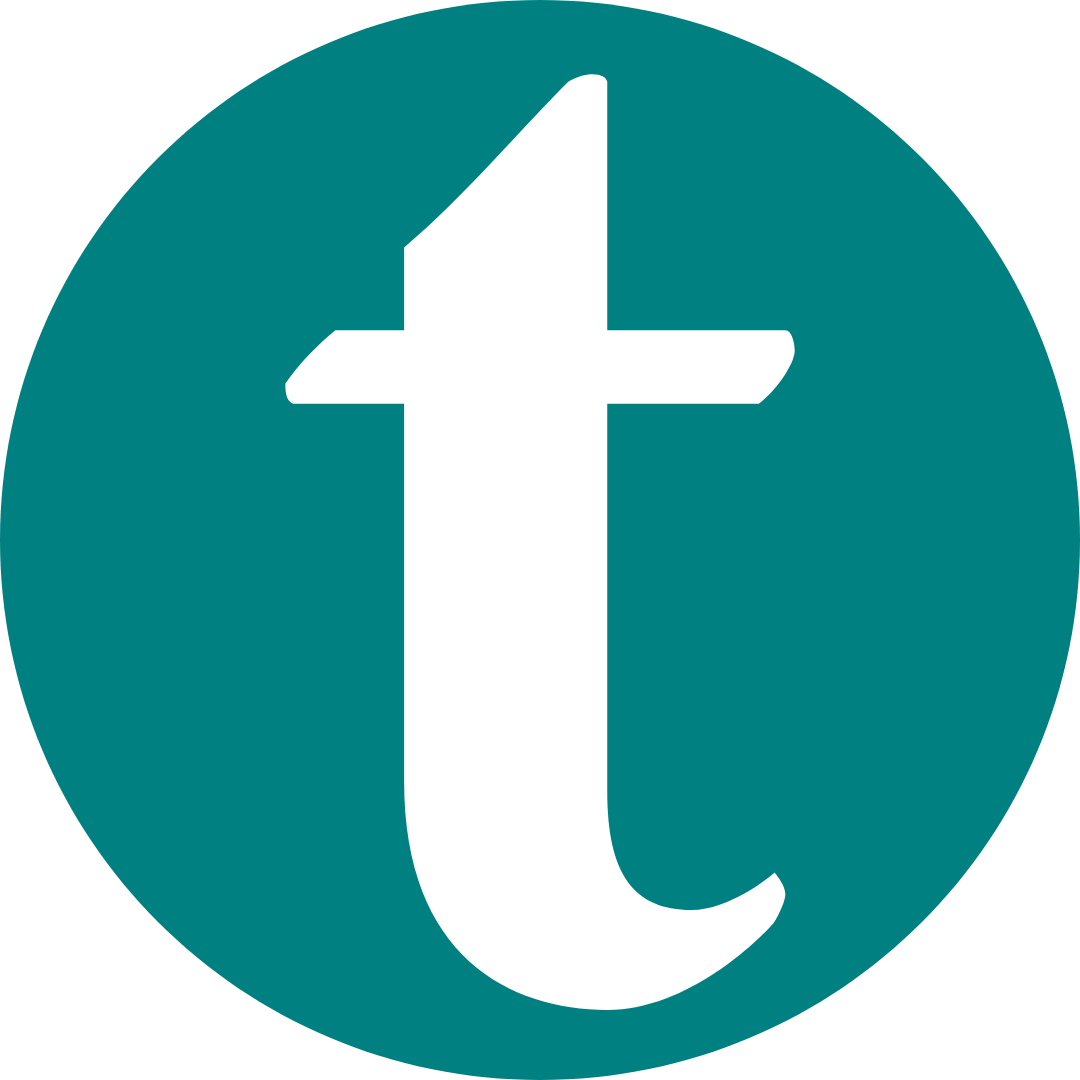
<style>
.page{position:relative;width:1080px;height:1080px;background:#008080}
.page>*{position:absolute;margin:0}
.t1{font:1600px "Crimson-Bold";color:#ffffff}
</style>
<div class="page">
<p class="t1" style="left:285px;top:70px;width:510px;height:940px">t</p>
</div>
